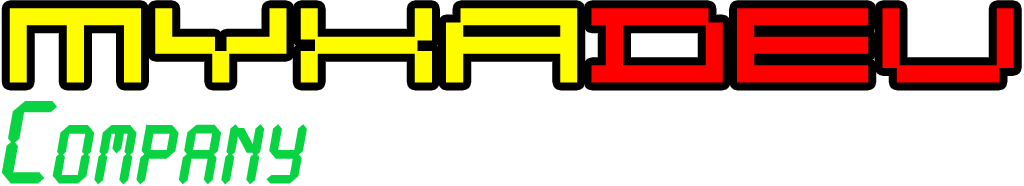
<style>
.page{position:relative;width:1024px;height:186px;background:#ffffff}
.page>*{position:absolute;margin:0}
.t1{font:99.9px "DSOlymPix";color:#fffc00;font-weight:bold}
.t2{font:99.9px "DSOlymPix";color:#ff0000;font-weight:bold}
.t3{font:99.9px "Crystal";color:#09d342;font-weight:bold}
</style>
<div class="page">
<p class="t1" style="left:9px;top:8px;width:1005px;height:75px">Myxa<span class="t2">Dev</span></p>
<p class="t3" style="left:1px;top:101px;width:306px;height:84px">Company</p>
</div>
